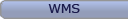
<style>
.page{position:relative;width:128px;height:19px;background:#949db9}
.page>*{position:absolute;margin:0}
.t1{font:12.5px "Verdana";color:#1b1b4c}
</style>
<div class="page">
<p class="t1" style="left:48px;top:4px;width:32px;height:9px">WMS</p>
</div>
